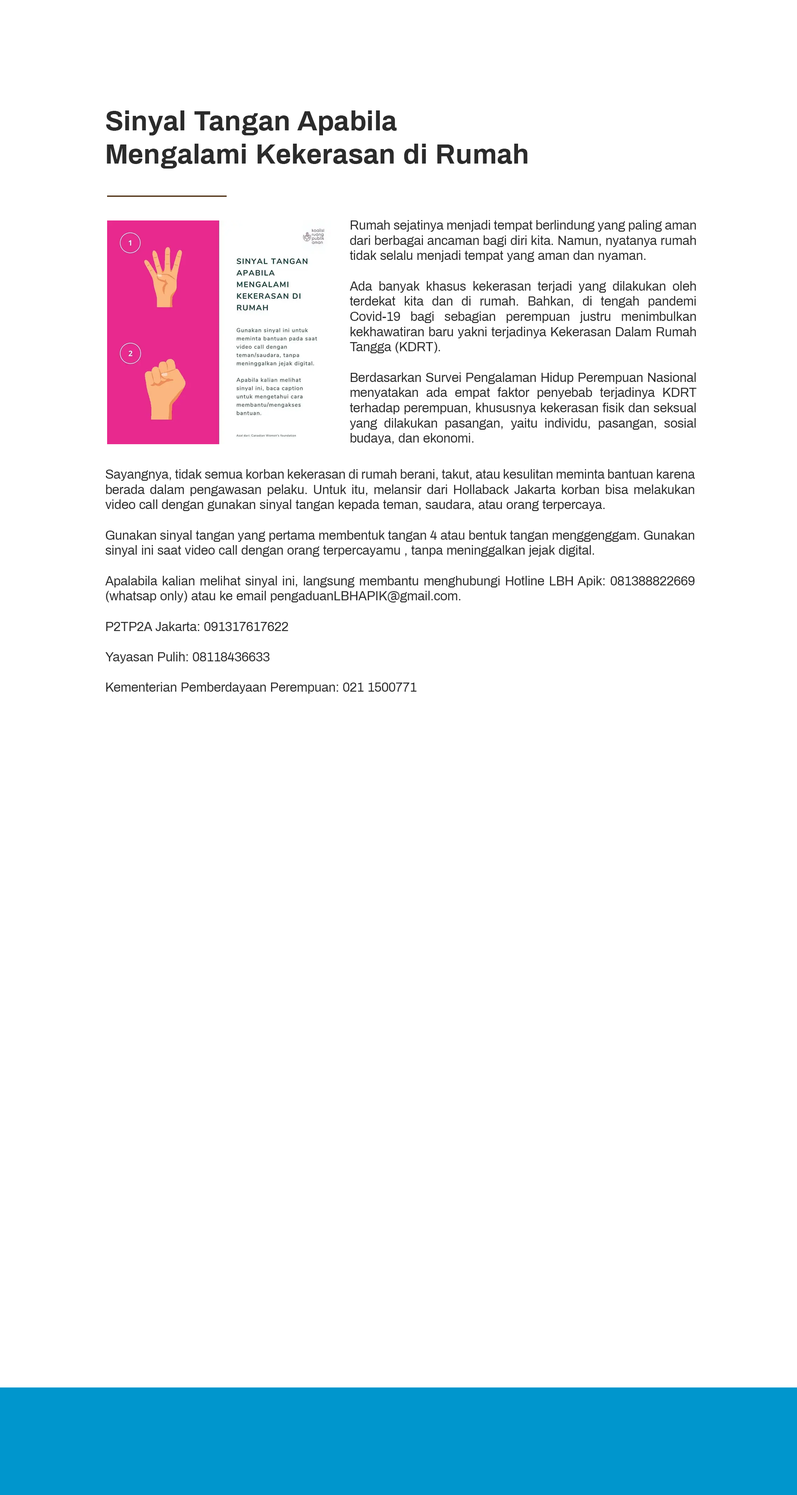
<style>
.page{position:relative;width:797px;height:1495px;background:#ffffff}
.page>*{position:absolute;margin:0}
.t1{font:27.7px "Archivo-Bold";color:#2b2b2b}
.t2{font:12.7px "Archivo-Regular";color:#2b2b2b}
</style>
<div class="page">
<p class="t1" style="left:106px;top:110px;width:422px;height:59px">Sinyal Tangan Apabila <br>Mengalami Kekerasan di Rumah</p>
<p class="t2" style="left:350px;top:220px;width:347px;height:225px;text-align:justify">Rumah sejatinya menjadi tempat berlindung yang paling aman dari berbagai ancaman bagi diri kita. Namun, nyatanya rumah tidak selalu menjadi tempat yang aman dan nyaman.<br><br>Ada banyak khasus kekerasan terjadi yang dilakukan oleh terdekat kita dan di rumah. Bahkan, di tengah pandemi Covid-19 bagi sebagian perempuan justru menimbulkan kekhawatiran baru yakni terjadinya Kekerasan Dalam Rumah Tangga (KDRT).<br><br>Berdasarkan Survei Pengalaman Hidup Perempuan Nasional menyatakan ada empat faktor penyebab terjadinya KDRT terhadap perempuan, khususnya kekerasan fisik dan seksual yang dilakukan pasangan, yaitu individu, pasangan, sosial budaya, dan ekonomi.</p>
<p class="t2" style="left:105px;top:469px;width:590px;height:225px;text-align:justify">Sayangnya, tidak semua korban kekerasan di rumah berani, takut, atau kesulitan meminta bantuan karena berada dalam pengawasan pelaku. Untuk itu, melansir dari Hollaback Jakarta korban bisa melakukan video call dengan gunakan sinyal tangan kepada teman, saudara, atau orang terpercaya.<br><br>Gunakan sinyal tangan yang pertama membentuk tangan 4 atau bentuk tangan menggenggam. Gunakan sinyal ini saat video call dengan orang terpercayamu , tanpa meninggalkan jejak digital.<br><br>Apalabila kalian melihat sinyal ini, langsung membantu menghubungi Hotline LBH Apik: 081388822669 (whatsap only) atau ke email pengaduanLBHAPIK@gmail.com.<br><br>P2TP2A Jakarta: 091317617622<br><br>Yayasan Pulih: 08118436633<br><br>Kementerian Pemberdayaan Perempuan: 021 1500771</p>
</div>
